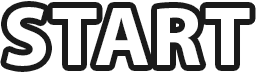
<style>
.page{position:relative;width:256px;height:73px;background:#ffffff}
.page>*{position:absolute;margin:0}
.t1{font:85px "MyriadPro-Bold";letter-spacing:0.025em;color:#ffffff}
</style>
<div class="page">
<p class="t1" style="left:6px;top:7px;width:244px;height:59px">START</p>
</div>
